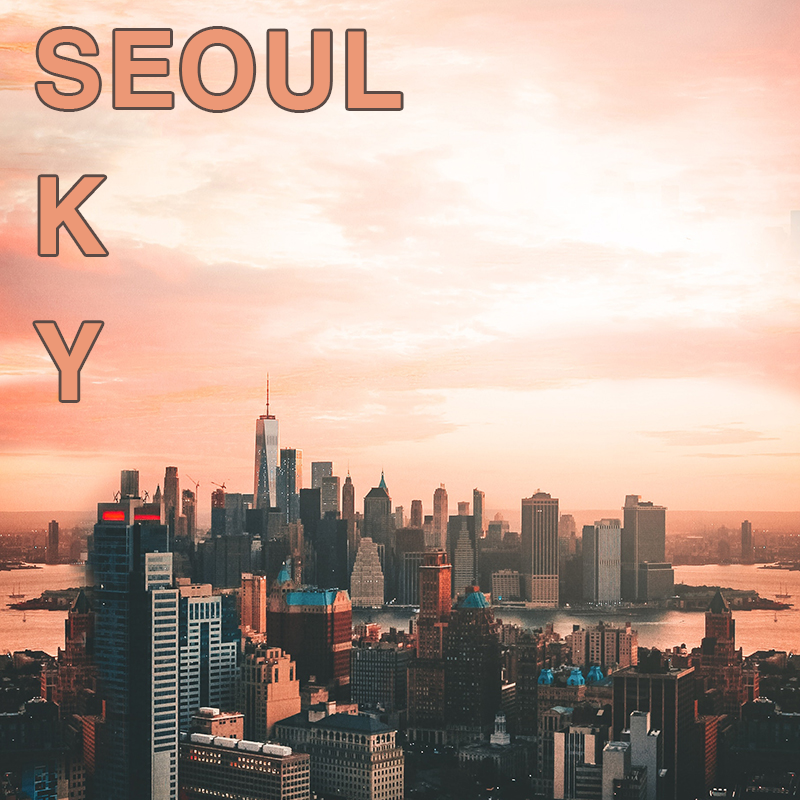
<style>
.page{position:relative;width:800px;height:800px}
.page>*{position:absolute;margin:0}
.t1{font:100px/146.2px "H2gtrE";color:#ec9876}
</style>
<div class="page">
<p class="t1" style="left:35px;top:29px;width:366px;height:371px">SEOUL<br>K<br>Y</p>
</div>
